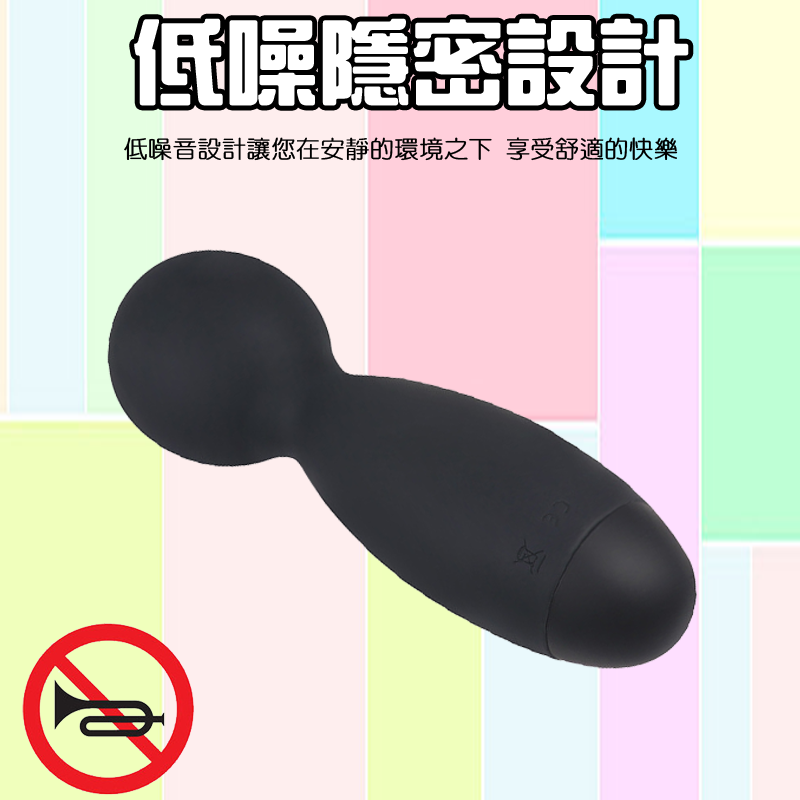
<style>
.page{position:relative;width:800px;height:800px}
.page>*{position:absolute;margin:0}
.t1{font:90.7px "HanWangZonYi";color:#ffffff;font-weight:bold}
.t2{font:24px "HanWangYenLight";color:#000000;font-weight:bold}
</style>
<div class="page">
<p class="t1" style="left:134px;top:18px;width:555px;height:88px">低噪隱密設計</p>
<p class="t2" style="left:124px;top:137px;width:554px;height:24px">低噪音設計讓您在安靜的環境之下 享受舒適的快樂</p>
</div>
